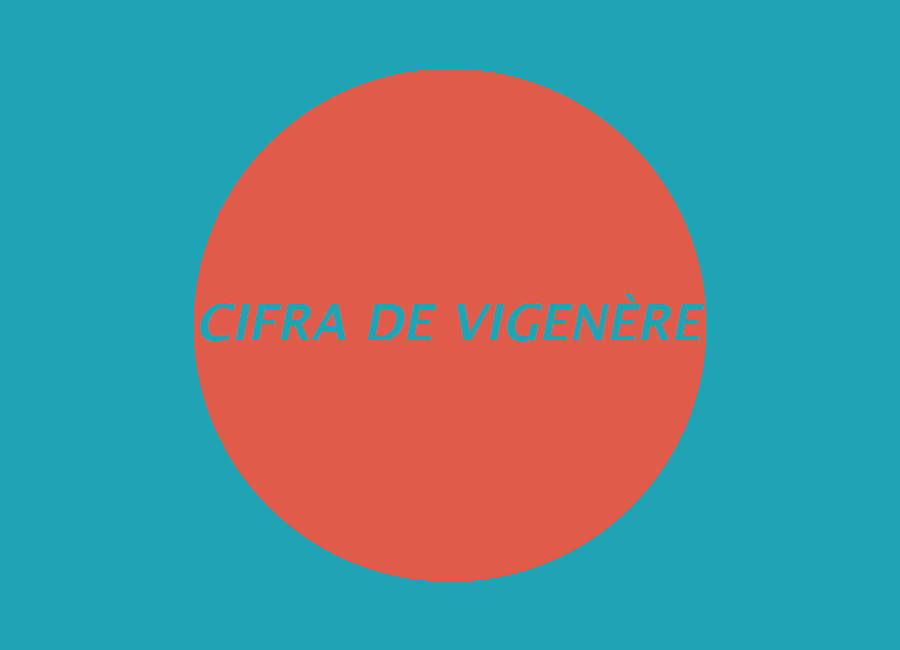
<style>
.page{position:relative;width:900px;height:650px;background:#1fa4b6}
.page>*{position:absolute;margin:0}
.t1{font:50px "LucidaSans-DemiItalic";color:#1fa4b6}
</style>
<div class="page">
<p class="t1" style="left:200px;top:294px;width:505px;height:47px">CIFRA DE VIGENÈRE</p>
</div>
